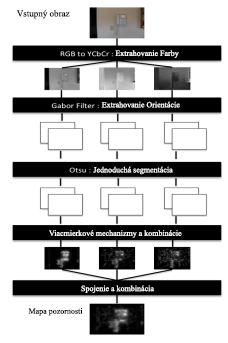
<style>
.page{position:relative;width:228px;height:343px;background:#ffffff}
.page>*{position:absolute;margin:0}
.t1{font:9px "TimesNewRomanPSMT";color:#000000}
.t2{font:8px "TimesNewRomanPSMT";color:#ffffff}
.t3{font:8px "TimesNewRomanPSMT";color:#000000}
</style>
<div class="page">
<p class="t1" style="left:16px;top:10px;width:54px;height:9px">Vstupný obraz</p>
<p class="t2" style="left:115px;top:50px;width:64px;height:8px">Extrahovanie Farby</p>
<p class="t2" style="left:101px;top:101px;width:79px;height:7px">Extrahovanie Orientácie</p>
<p class="t2" style="left:93px;top:166px;width:80px;height:9px">Jednoduchá segmentácia</p>
<p class="t2" style="left:49px;top:230px;width:133px;height:8px">Viacmierkové mechanizmy a kombinácie</p>
<p class="t2" style="left:81px;top:285px;width:73px;height:8px">Spojenie a kombinácia</p>
<p class="t3" style="left:28px;top:308px;width:55px;height:8px">Mapa pozornosti</p>
</div>
